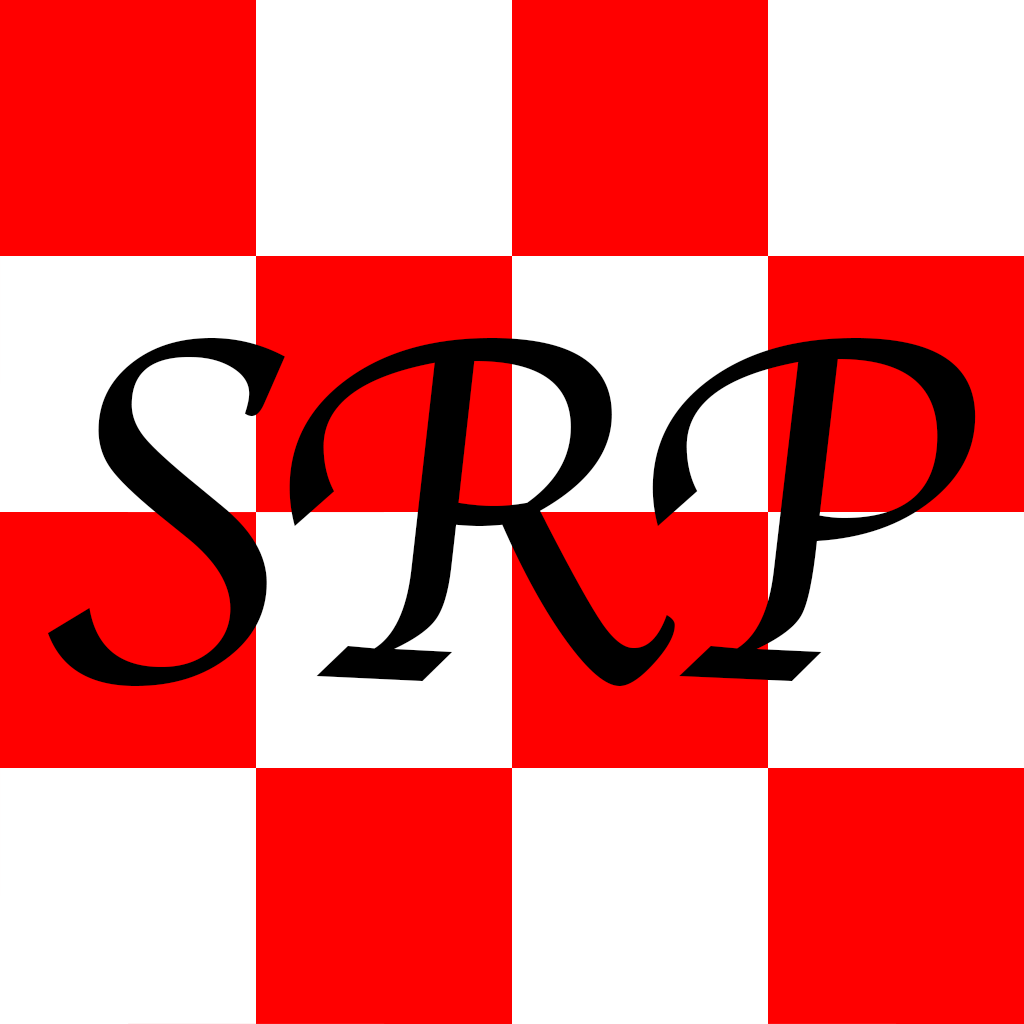
<style>
.page{position:relative;width:1024px;height:1024px;background:#ffffff}
.page>*{position:absolute;margin:0}
.t1{font:500px "Apple-Chancery";letter-spacing:-0.06em;color:#000000}
</style>
<div class="page">
<p class="t1" style="left:47px;top:338px;width:929px;height:348px">SRP</p>
</div>
